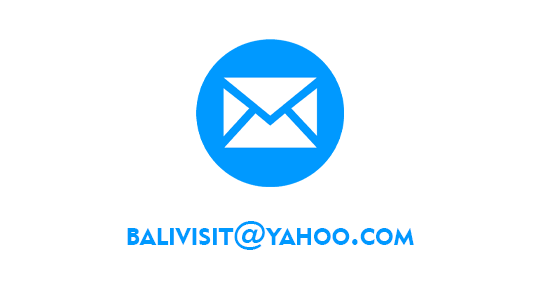
<style>
.page{position:relative;width:540px;height:300px;background:#ffffff}
.page>*{position:absolute;margin:0}
.t1{font:33.6px "Geometric415BT-BlackA";letter-spacing:-0.005em;color:#0099ff;font-variant:small-caps}
</style>
<div class="page">
<p class="t1" style="left:127px;top:221px;width:287px;height:29px">balivisit@yahoo.com</p>
</div>
